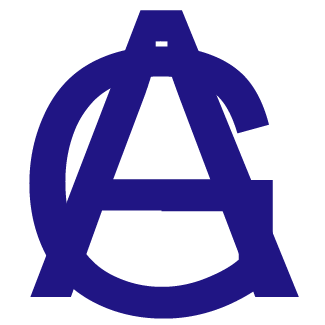
<style>
.page{position:relative;width:325px;height:325px;background:#ffffff}
.page>*{position:absolute;margin:0}
.t1{font:400.4px "ArialMT";color:#201584}
.t2{font:367.3px "ArialMT";color:#201584}
</style>
<div class="page">
<p class="t1" style="left:30px;top:10px;width:269px;height:287px">A</p>
<p class="t2" style="left:29px;top:46px;width:244px;height:273px">G</p>
</div>
